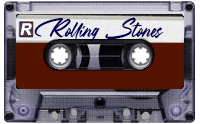
<style>
.page{position:relative;width:200px;height:124px}
.page>*{position:absolute;margin:0}
.t1{font:24px "Bigtimes";color:#07005f;font-style:italic;scale:0.83 1}
.t2{font:16px "Arial-BoldMT";color:#ffffff;font-style:italic}
</style>
<div class="page">
<p class="t1" style="left:34px;top:17px;width:129px;height:25px">Rolling Stones</p>
<p class="t2" style="left:20px;top:23px;width:12px;height:12px">R</p>
</div>
